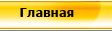
<style>
.page{position:relative;width:112px;height:31px}
.page>*{position:absolute;margin:0}
.t1{font:12px "Tahoma-Bold";letter-spacing:0.04em;color:#000000}
</style>
<div class="page">
<p class="t1" style="left:20px;top:8px;width:54px;height:9px">Главная</p>
</div>
